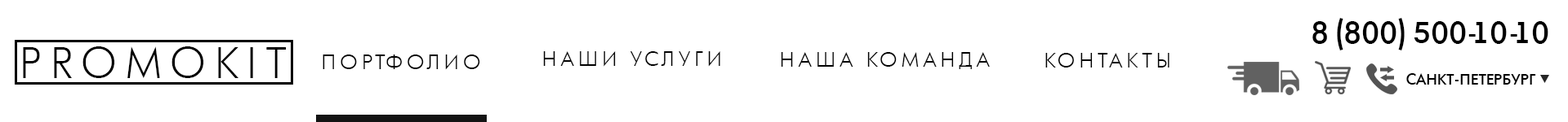
<style>
.page{position:relative;width:1568px;height:122px;background:#ffffff}
.page>*{position:absolute;margin:0}
.t1{font:29.4px "AFuturaOrtoLtBold";color:#000000}
.t2{font:40.4px "AFuturaOrtoLtLight";letter-spacing:0.22em;color:#000000}
.t3{font:19.6px "AFuturaOrtoLtLight";letter-spacing:0.22em;color:#000000}
.t4{font:14.7px "AFuturaOrtoLtBold";color:#000000}
</style>
<div class="page">
<p class="t1" style="left:1312px;top:18px;width:236px;height:33px">8 (800) 500-10-10</p>
<p class="t2" style="left:23px;top:47px;width:263px;height:31px">PROMOKIT</p>
<p class="t3" style="left:543px;top:51px;width:177px;height:16px">НАШИ УСЛУГИ</p>
<p class="t3" style="left:781px;top:52px;width:209px;height:17px">НАША КОМАНДА</p>
<p class="t3" style="left:1045px;top:53px;width:124px;height:15px">КОНТАКТЫ</p>
<p class="t3" style="left:323px;top:55px;width:157px;height:15px">ПОРТФОЛИО</p>
<p class="t4" style="left:1406px;top:74px;width:130px;height:11px">САНКТ-ПЕТЕРБУРГ</p>
</div>
